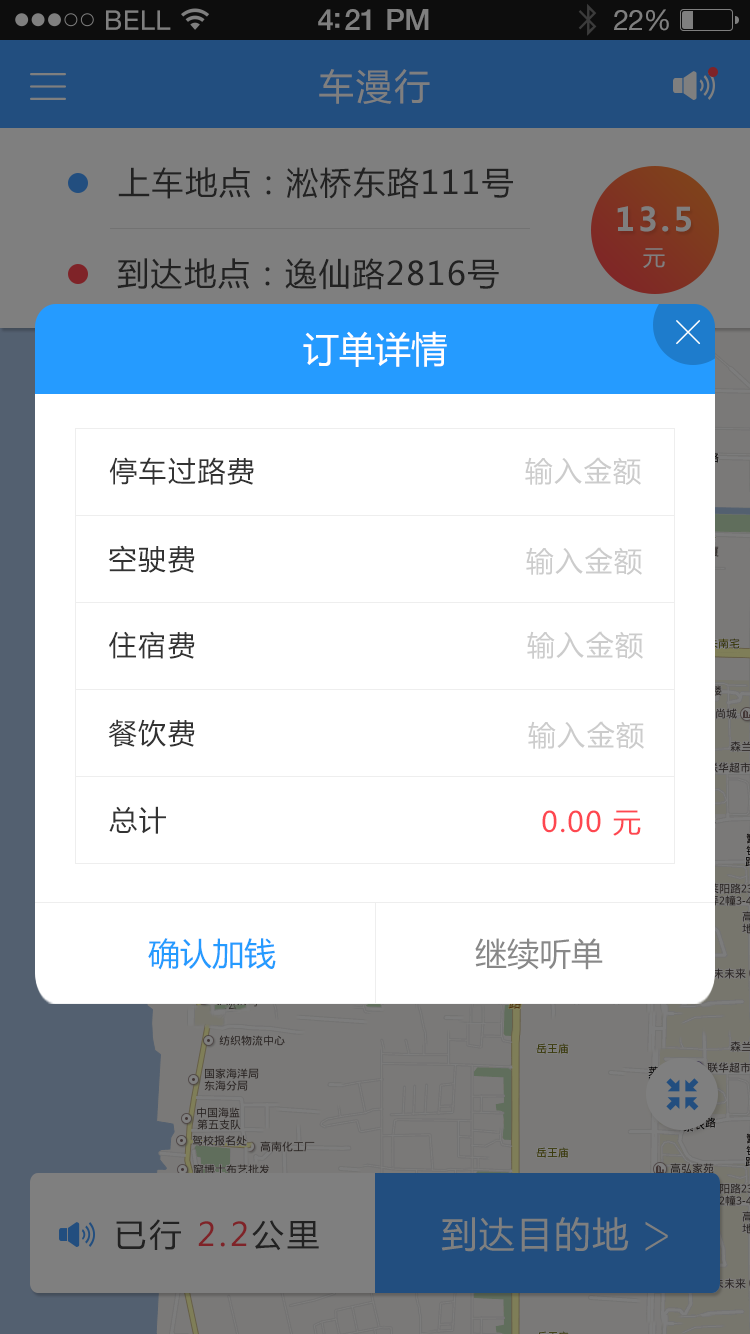
<style>
.page{position:relative;width:750px;height:1334px;background:#ffffff}
.page>*{position:absolute;margin:0}
.t1{font:36px "MicrosoftYaHei";letter-spacing:0.05em;color:#7f7f7f}
.t2{font:32px "MicrosoftYaHei";letter-spacing:0.05em;color:#222222}
.t3{font:32px "MicrosoftYaHei-Bold";letter-spacing:0.1em;color:#7f7f7f}
.t4{font:22px "MicrosoftYaHei";letter-spacing:0.1em;color:#7f7f7f}
.t5{font:36px "MicrosoftYaHei";color:#ffffff}
.t6{font:28px "MicrosoftYaHei";letter-spacing:0.05em;color:#333333}
.t7{font:28px "MicrosoftYaHei";letter-spacing:0.05em;color:#cccccc}
.t8{font:28px "MicrosoftYaHei";letter-spacing:0.05em;color:#fe4750}
.t9{font:32px "MicrosoftYaHei";color:#259bff}
.t10{font:32px "MicrosoftYaHei";color:#888888}
.t11{font:32px "MicrosoftYaHei";letter-spacing:0.1em;color:#222222}
</style>
<div class="page">
<p class="t1" style="left:319px;top:69px;width:111px;height:35px">车漫行</p>
<p class="t2" style="left:118px;top:167px;width:395px;height:32px">上车地点：淞桥东路111号</p>
<p class="t3" style="left:617px;top:206px;width:74px;height:26px">13.5</p>
<p class="t4" style="left:643px;top:248px;width:22px;height:20px">元</p>
<p class="t2" style="left:117px;top:258px;width:382px;height:32px">到达地点：逸仙路2816号</p>
<p class="t5" style="left:303px;top:331px;width:144px;height:36px">订单详情</p>
<p class="t6" style="left:109px;top:457px;width:145px;height:28px">停车过路费</p>
<p class="t7" style="left:525px;top:457px;width:116px;height:28px">输入金额</p>
<p class="t6" style="left:108px;top:545px;width:87px;height:28px">空驶费</p>
<p class="t7" style="left:526px;top:547px;width:116px;height:28px">输入金额</p>
<p class="t6" style="left:109px;top:631px;width:86px;height:28px">住宿费</p>
<p class="t7" style="left:527px;top:631px;width:116px;height:28px">输入金额</p>
<p class="t6" style="left:108px;top:719px;width:87px;height:28px">餐饮费</p>
<p class="t7" style="left:528px;top:721px;width:116px;height:28px">输入金额</p>
<p class="t6" style="left:109px;top:806px;width:57px;height:28px">总计</p>
<p class="t8" style="left:542px;top:810px;width:99px;height:26px">0.00 元</p>
<p class="t9" style="left:148px;top:938px;width:128px;height:32px">确认加钱</p>
<p class="t10" style="left:475px;top:938px;width:128px;height:32px">继续听单</p>
<p class="t11" style="left:116px;top:1219px;width:203px;height:32px">已行 2.2公里</p>
</div>
